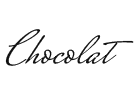
<style>
.page{position:relative;width:136px;height:100px;background:#ffffff}
.page>*{position:absolute;margin:0}
.t1{font:48px "MrsSaintDelafield-Regular";color:#111111}
</style>
<div class="page">
<p class="t1" style="left:5px;top:29px;width:129px;height:37px">Chocolat</p>
</div>
